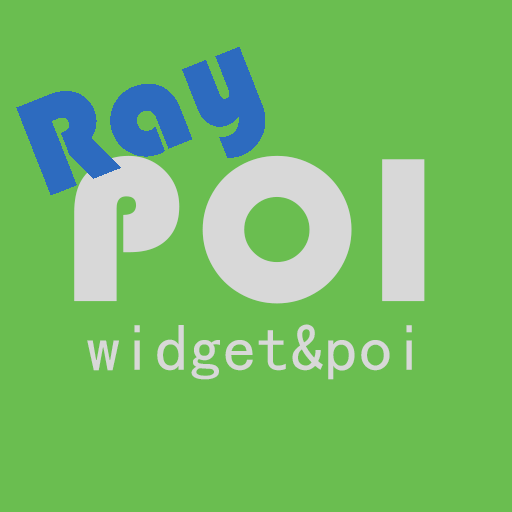
<style>
.page{position:relative;width:512px;height:512px;background:#6abe50}
.page>*{position:absolute;margin:0}
.t1{font:141.7px "STHupo";letter-spacing:0.01em;color:#2d6bbf}
.t2{font:212.4px "STHupo";letter-spacing:0.05em;color:#d8d8d8}
.t3{font:66.7px "SimHei";letter-spacing:0.01em;color:#d8d8d8}
</style>
<div class="page">
<p class="t1" style="left:16px;top:47px;width:249px;height:148px;rotate:-21deg">Ray</p>
<p class="t2" style="left:74px;top:155px;width:351px;height:149px">POI</p>
<p class="t3" style="left:87px;top:324px;width:325px;height:56px">widget&amp;poi</p>
</div>
